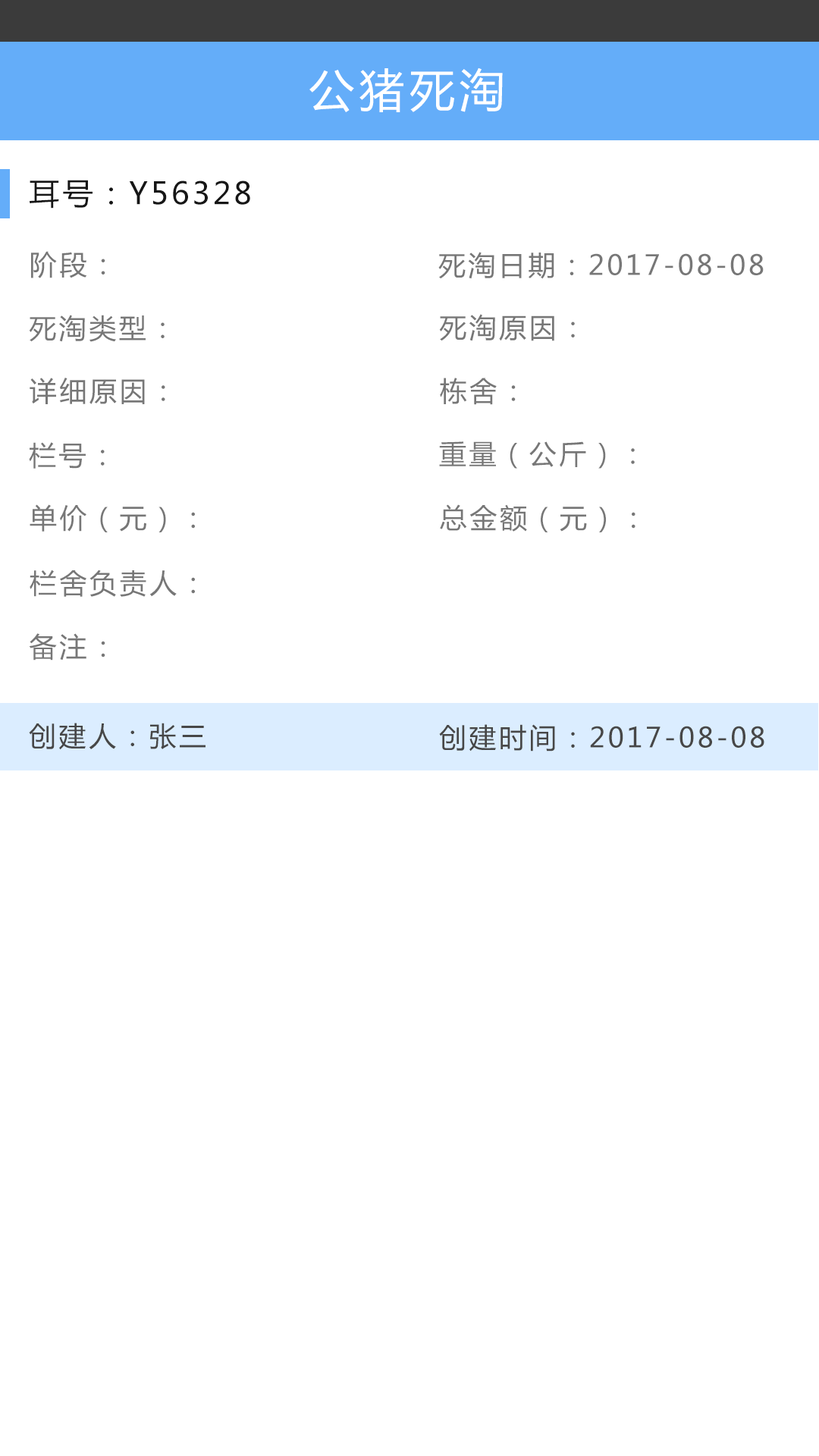
<style>
.page{position:relative;width:819px;height:1456px;background:#ffffff}
.page>*{position:absolute;margin:0}
.t1{font:45.5px "MicrosoftYaHei";letter-spacing:0.1em;color:#ffffff}
.t2{font:30.3px "MicrosoftYaHei";letter-spacing:0.1em;color:#161616}
.t3{font:27.3px "MicrosoftYaHei";letter-spacing:0.1em;color:#777777}
.t4{font:27.3px "MicrosoftYaHei";letter-spacing:0.1em;color:#474747}
</style>
<div class="page">
<p class="t1" style="left:309px;top:67px;width:194px;height:45px">公猪死淘</p>
<p class="t2" style="left:30px;top:180px;width:220px;height:29px">耳号：Y56328</p>
<p class="t3" style="left:31px;top:251px;width:74px;height:27px">阶段：</p>
<p class="t3" style="left:438px;top:252px;width:326px;height:27px">死淘日期：2017-08-08</p>
<p class="t3" style="left:29px;top:315px;width:136px;height:27px">死淘类型：</p>
<p class="t3" style="left:439px;top:314px;width:136px;height:27px">死淘原因：</p>
<p class="t3" style="left:30px;top:378px;width:135px;height:26px">详细原因：</p>
<p class="t3" style="left:440px;top:378px;width:76px;height:27px">栋舍：</p>
<p class="t3" style="left:29px;top:442px;width:76px;height:27px">栏号：</p>
<p class="t3" style="left:439px;top:441px;width:196px;height:28px">重量（公斤）：</p>
<p class="t3" style="left:30px;top:504px;width:165px;height:28px">单价（元）：</p>
<p class="t3" style="left:440px;top:504px;width:195px;height:28px">总金额（元）：</p>
<p class="t3" style="left:30px;top:570px;width:165px;height:27px">栏舍负责人：</p>
<p class="t3" style="left:29px;top:633px;width:76px;height:27px">备注：</p>
<p class="t4" style="left:29px;top:723px;width:177px;height:27px">创建人：张三</p>
<p class="t4" style="left:439px;top:724px;width:325px;height:27px">创建时间：2017-08-08</p>
</div>
